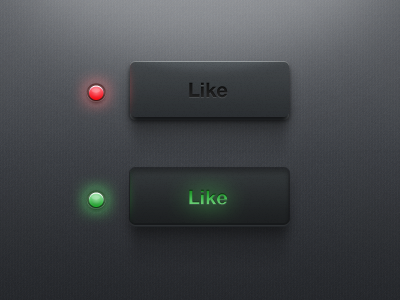
<style>
.page{position:relative;width:400px;height:300px}
.page>*{position:absolute;margin:0}
.t1{font:20px "HelveticaNeue-Bold";color:#1a1a1a}
.t2{font:20px "HelveticaNeue-Bold"}
</style>
<div class="page">
<p class="t1" style="left:189px;top:82px;width:39px;height:16px">Like</p>
<p class="t2" style="left:189px;top:189px;width:39px;height:16px">Like</p>
</div>
